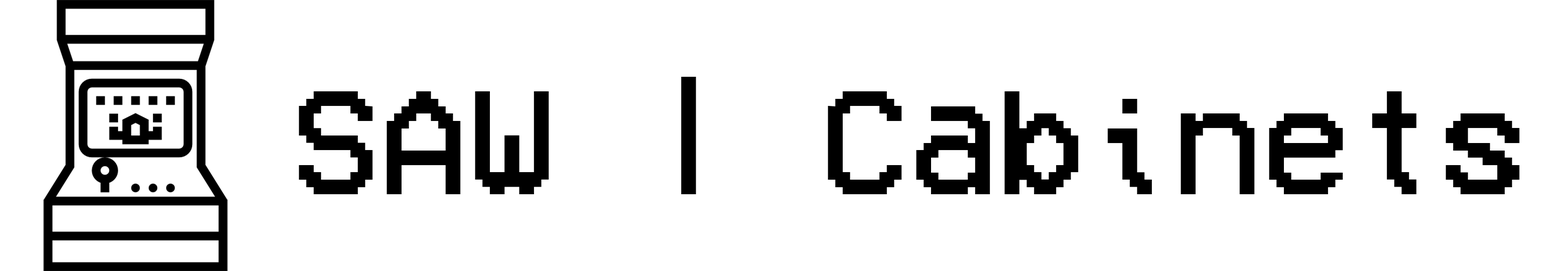
<style>
.page{position:relative;width:1568px;height:271px;background:#ffffff}
.page>*{position:absolute;margin:0}
.t1{font:150.6px "VCROSDMono";color:#000000}
</style>
<div class="page">
<p class="t1" style="left:299px;top:77px;width:1221px;height:117px">SAW | Cabinets</p>
</div>
